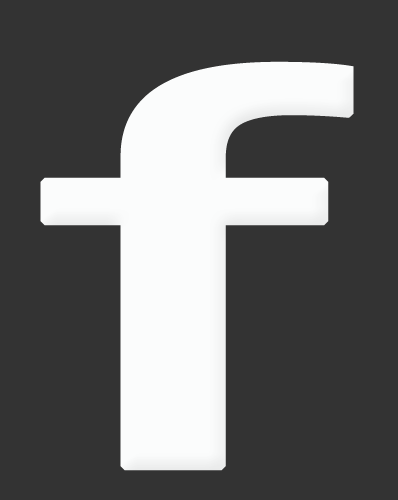
<style>
.page{position:relative;width:398px;height:500px;background:#333333}
.page>*{position:absolute;margin:0}
.t1{font:612.1px "Vrinda";color:#fbfcfc;font-weight:bold;scale:1.92 1}
</style>
<div class="page">
<p class="t1" style="left:40px;top:61px;width:314px;height:410px">f</p>
</div>
